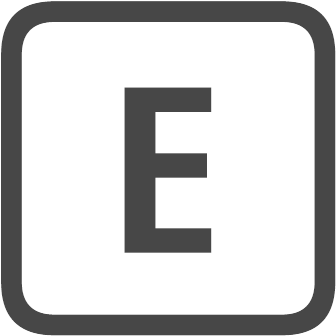
<style>
.page{position:relative;width:336px;height:336px;background:#ffffff}
.page>*{position:absolute;margin:0}
.t1{font:220px "HelveticaLTStd-BoldCond";color:#474747}
</style>
<div class="page">
<p class="t1" style="left:124px;top:87px;width:88px;height:166px">E</p>
</div>
